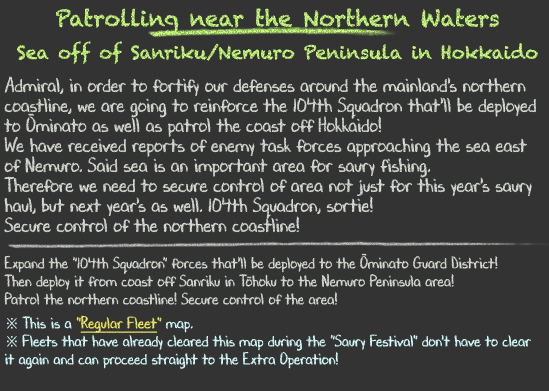
<style>
.page{position:relative;width:549px;height:391px;background:#333333}
.page>*{position:absolute;margin:0}
.t1{font:18px/36px "Chalkduster"}
.t2{font:22px/36px "Chalkduster"}
.t3{font:20px/20px "DJBChalkItUp";color:#d9ded6;scale:0.9 1}
.t4{font:16px/18px "DJBChalkItUp";color:#d9ded6;scale:0.9 1}
.t5{font:16px/24px "DJBChalkItUp";color:#d9ded6;scale:0.9 1}
.t6{font:16px/18px "TimesNewRomanPSMT";color:#d7feff;scale:0.9 1}
.t7{font:16px/18px "DJBChalkItUp";color:#d7feff;scale:0.9 1}
.t8{font:16px/18px "DJBChalkItUp";color:#f5ed68;scale:0.9 1}
.t9{font:16px/18px "DJBChalkItUp";color:#f5ed68;text-decoration:underline;scale:0.9 1}
</style>
<div class="page">
<p class="t1" style="left:17px;top:8px;width:521px;height:56px;text-align:center"><span class="t2">Patrolling near the Northern Waters<br></span>Sea off of Sanriku/Nemuro Peninsula in Hokkaido</p>
<p class="t3" style="left:4px;top:76px;width:532px;height:293px">Admiral, in order to fortify our defenses around the mainland's northern<br>coastline, we are going to reinforce the 104th Squadron that'll be deployed<br>to Ōminato as well as patrol the coast off Hokkaido!<br>We have received reports of enemy task forces approaching the sea east<br>of Nemuro. Said sea is an important area for saury fishing. <br>Therefore we need to secure control of area not just for this year's saury<br>haul, but next year's as well. 104th Squadron, sortie!<br>Secure control of the northern coastline!<br><br><span class="t4">Expand the "104th Squadron" forces that'll be deployed to the Ōminato Guard District!<br>Then deploy it from coast off Sanriku in Tōhoku to the Nemuro Peninsula area!<br></span><span class="t5">Patrol the northern coastline! Secure control of the area!<br></span><span class="t6">※ </span><span class="t7">This is a </span><span class="t8">"</span><span class="t9">Regular Fleet</span><span class="t8">"</span><span class="t7"> map.<br></span><span class="t6">※ </span><span class="t7">Fleets that have already cleared this map during the "Saury Festival" don't have to clear<br>it again and can proceed straight to the Extra Operation!</span></p>
</div>
